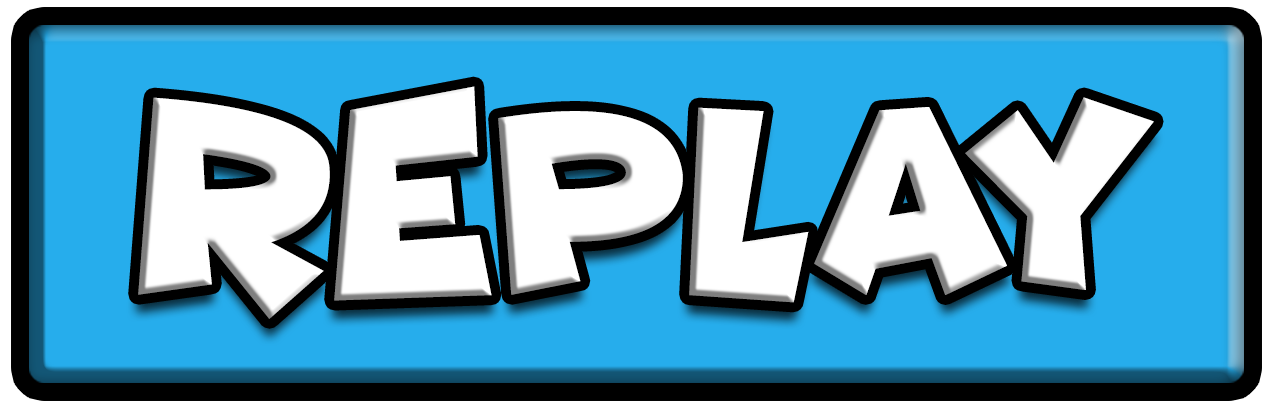
<style>
.page{position:relative;width:1272px;height:407px;background:#26adec}
.page>*{position:absolute;margin:0}
.t1{font:270.1px "Funhouse";color:#ffffff}
</style>
<div class="page">
<p class="t1" style="left:138px;top:86px;width:1016px;height:233px">REPLAY</p>
</div>
